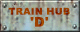
<style>
.page{position:relative;width:80px;height:32px}
.page>*{position:absolute;margin:0}
.t1{font:9.3px/9.3px "Arial-Black";letter-spacing:0.04em;color:#9d4100}
.t2{font:13.3px/12px "Arial-Black";letter-spacing:0.02em;color:#9d4100}
</style>
<div class="page">
<p class="t1" style="left:8px;top:7px;width:62px;height:20px;text-align:center">TRAIN HUB<br><span class="t2">'D'</span></p>
</div>
